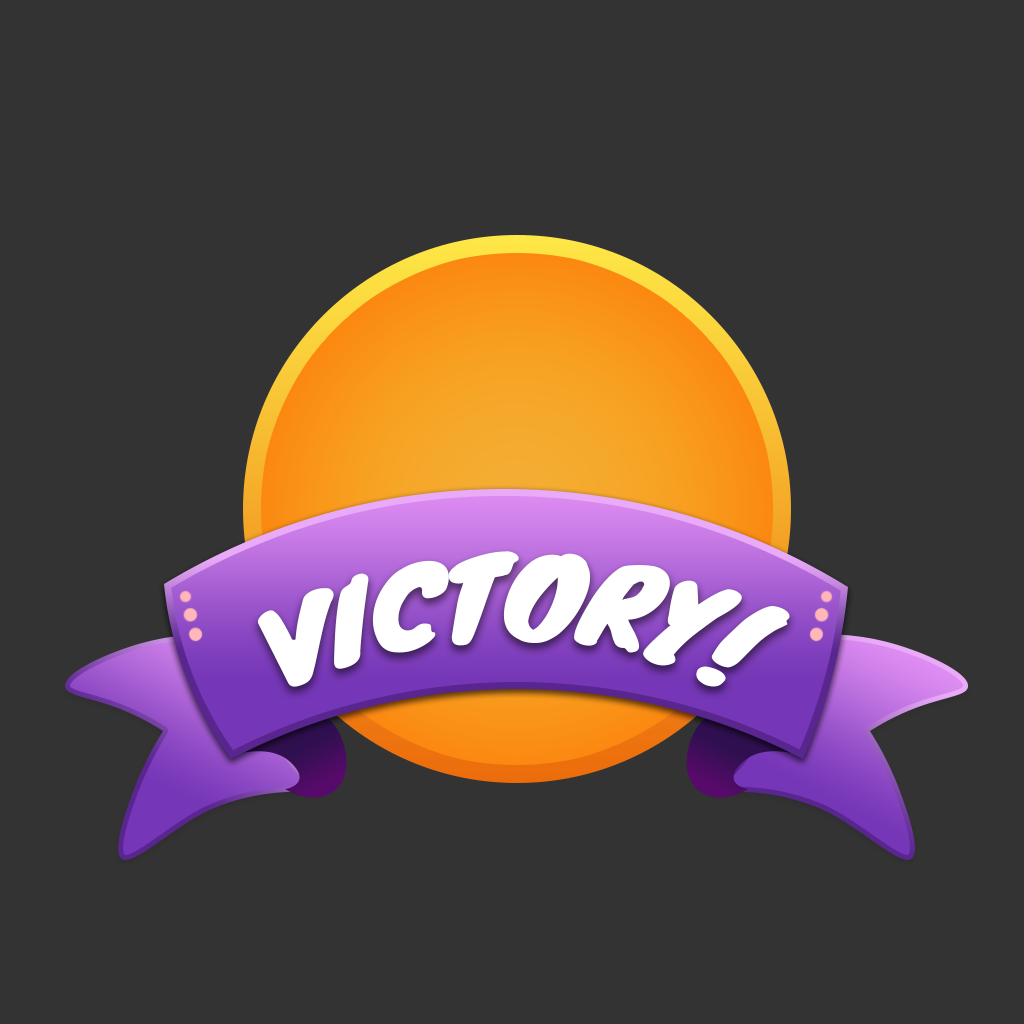
<style>
.page{position:relative;width:1024px;height:1024px;background:#333333}
.page>*{position:absolute;margin:0}
.t1{font:104.9px "Knewave-Regular";color:#ffffff}
</style>
<div class="page">
<p class="t1" style="left:257px;top:551px;width:533px;height:136px">VICTORY!</p>
</div>
